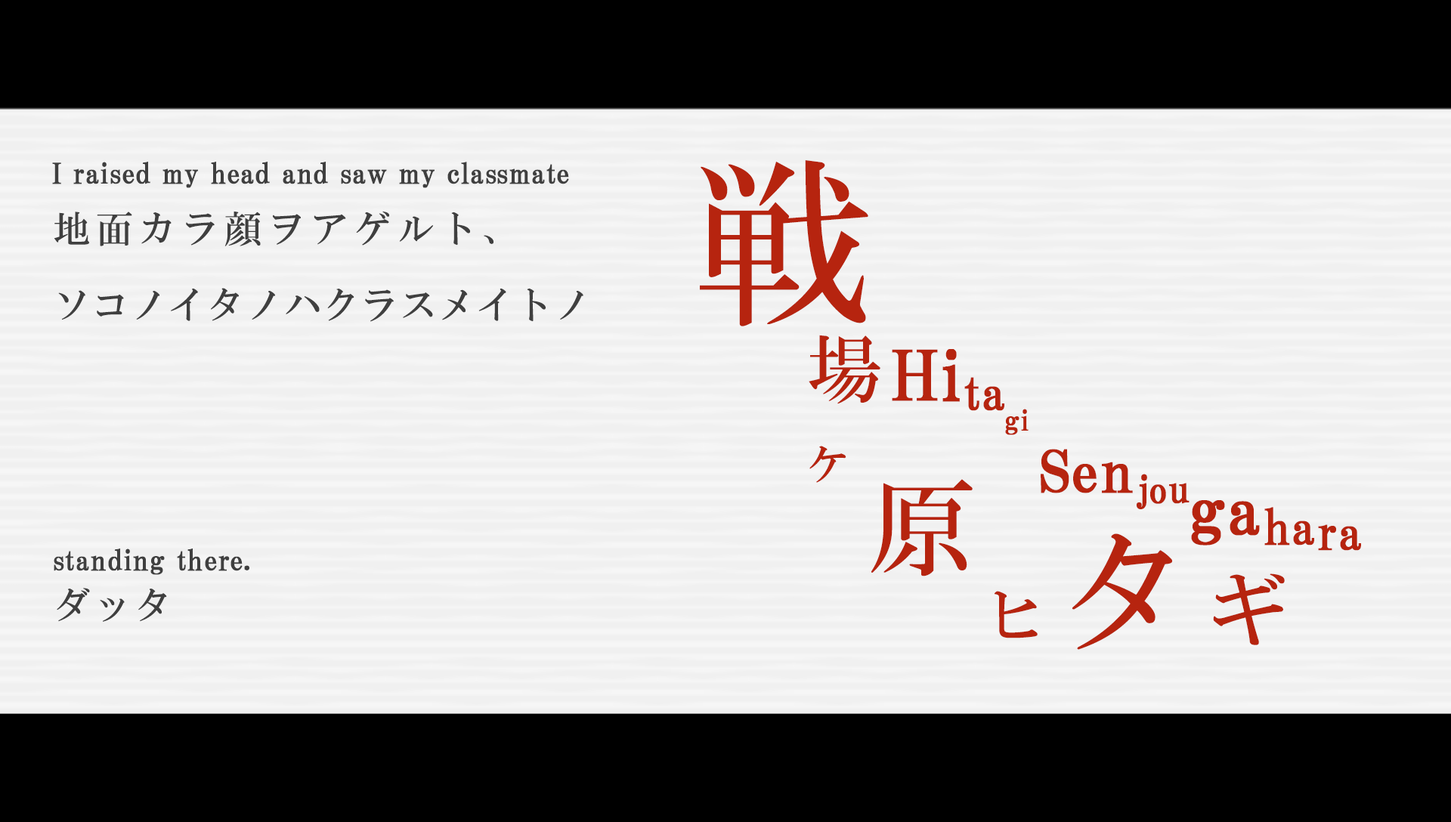
<style>
.page{position:relative;width:1451px;height:822px;background:#f0f0f0}
.page>*{position:absolute;margin:0}
.t1{font:28.2px "HGPMinchoB";letter-spacing:0.01em;color:#3f3f3f;font-weight:bold}
.t2{font:179.1px "HGMinchoB";letter-spacing:0.1em;color:#b6240f}
.t3{font:37px/76.3px "HGMinchoB";letter-spacing:0.04em;color:#3f3f3f}
.t4{font:37px/76.3px "HGMinchoB";letter-spacing:0.16em;color:#3f3f3f}
.t5{font:74px "HGMinchoB";letter-spacing:0.1em;color:#b6240f}
.t6{font:48.4px/52.1px "HGPMinchoB";letter-spacing:0.01em;color:#b6240f;font-weight:bold}
.t7{font:68.5px/52.1px "HGPMinchoB";letter-spacing:0.01em;color:#b6240f;font-weight:bold}
.t8{font:48.4px/10.1px "HGPMinchoB";letter-spacing:0.01em;color:#b6240f;font-weight:bold}
.t9{font:28.2px/10.1px "HGPMinchoB";letter-spacing:0.01em;color:#b6240f;font-weight:bold}
.t10{font:58.4px/30.2px "HGPMinchoB";letter-spacing:0.01em;color:#b6240f;font-weight:bold}
.t11{font:38.3px/52.1px "HGPMinchoB";letter-spacing:0.01em;color:#b6240f;font-weight:bold}
.t12{font:51.4px "HGMinchoB";letter-spacing:0.1em;color:#b6240f}
.t13{font:107.3px "HGMinchoB";letter-spacing:0.1em;color:#b6240f}
.t14{font:131.5px "HGMinchoB";letter-spacing:0.1em;color:#b6240f}
.t15{font:80.8px "HGMinchoB";letter-spacing:0.1em;color:#b6240f}
.t16{font:37px "HGMinchoB";letter-spacing:0.1em;color:#3f3f3f}
.t17{font:65px "HGMinchoB";letter-spacing:0.1em;color:#b6240f}
</style>
<div class="page">
<p class="t1" style="left:52px;top:162px;width:517px;height:26px">I raised my head and saw my classmate</p>
<p class="t2" style="left:700px;top:160px;width:168px;height:166px">戦</p>
<p class="t3" style="left:54px;top:211px;width:529px;height:111px"><span class="t4">地面カラ顔ヲアゲルト、<br></span>ソコノイタノハクラスメイトノ</p>
<p class="t5" style="left:808px;top:335px;width:72px;height:69px">場</p>
<p class="t6" style="left:892px;top:349px;width:469px;height:202px"><span class="t7">Hi</span><span class="t8">ta<br></span><span class="t9">           gi <br>         </span><span class="t10">Sen</span><span class="t11">jou<br>     </span><span class="t7">       ga</span>hara</p>
<p class="t12" style="left:809px;top:446px;width:37px;height:37px">ヶ</p>
<p class="t13" style="left:871px;top:479px;width:101px;height:97px">原</p>
<p class="t14" style="left:1071px;top:533px;width:102px;height:117px">タ</p>
<p class="t1" style="left:54px;top:549px;width:195px;height:26px">standing there.</p>
<p class="t15" style="left:1213px;top:573px;width:71px;height:72px">ギ</p>
<p class="t16" style="left:57px;top:588px;width:110px;height:34px">ダッタ</p>
<p class="t17" style="left:994px;top:591px;width:43px;height:47px">ヒ</p>
</div>
